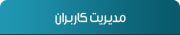
<style>
.page{position:relative;width:180px;height:35px}
.page>*{position:absolute;margin:0}
.t1{font:14px "Mj_Flow";letter-spacing:-0.001em;color:#f1f2f2}
</style>
<div class="page">
<p class="t1" style="left:55px;top:12px;width:71px;height:13px">مدیـریت کاربـران</p>
</div>
